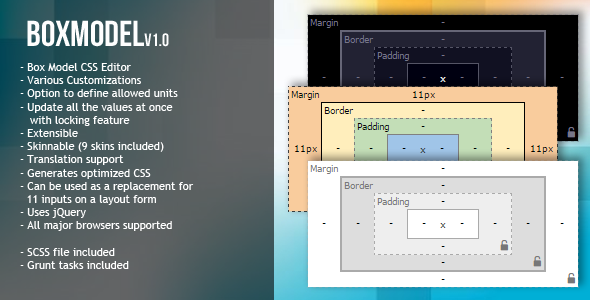
<style>
.page{position:relative;width:590px;height:300px}
.page>*{position:absolute;margin:0}
.t1{font:36px "BebasNeue";color:#fefefe}
.t2{font:18px "BebasNeue";color:#fefefe}
.t3{font:11px "TrebuchetMS";color:#ffffff}
</style>
<div class="page">
<p class="t1" style="left:27px;top:20px;width:142px;height:27px">BoxModel<span class="t2">v1.0</span></p>
<p class="t3" style="left:20px;top:63px;width:174px;height:206px">- Box Model CSS Editor<br>- Various Customizations<br>- Option to define allowed units<br>- Update all the values at once <br>   with locking feature<br>- Extensible<br>- Skinnable (9 skins included)<br>- Translation support<br>- Generates optimized CSS<br>- Can be used as a replacement for <br>  11 inputs on a layout form<br>- Uses jQuery<br>- All major browsers supported<br><br>- SCSS file included<br>- Grunt tasks included</p>
</div>
